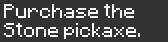
<style>
.page{position:relative;width:168px;height:42px;background:#333333}
.page>*{position:absolute;margin:0}
.t1{font:16px "Minecraftia-Regular";color:#ffffff}
</style>
<div class="page">
<p class="t1" style="left:4px;top:4px;width:136px;height:35px">Purchase the<br>Stone pickaxe.</p>
</div>
